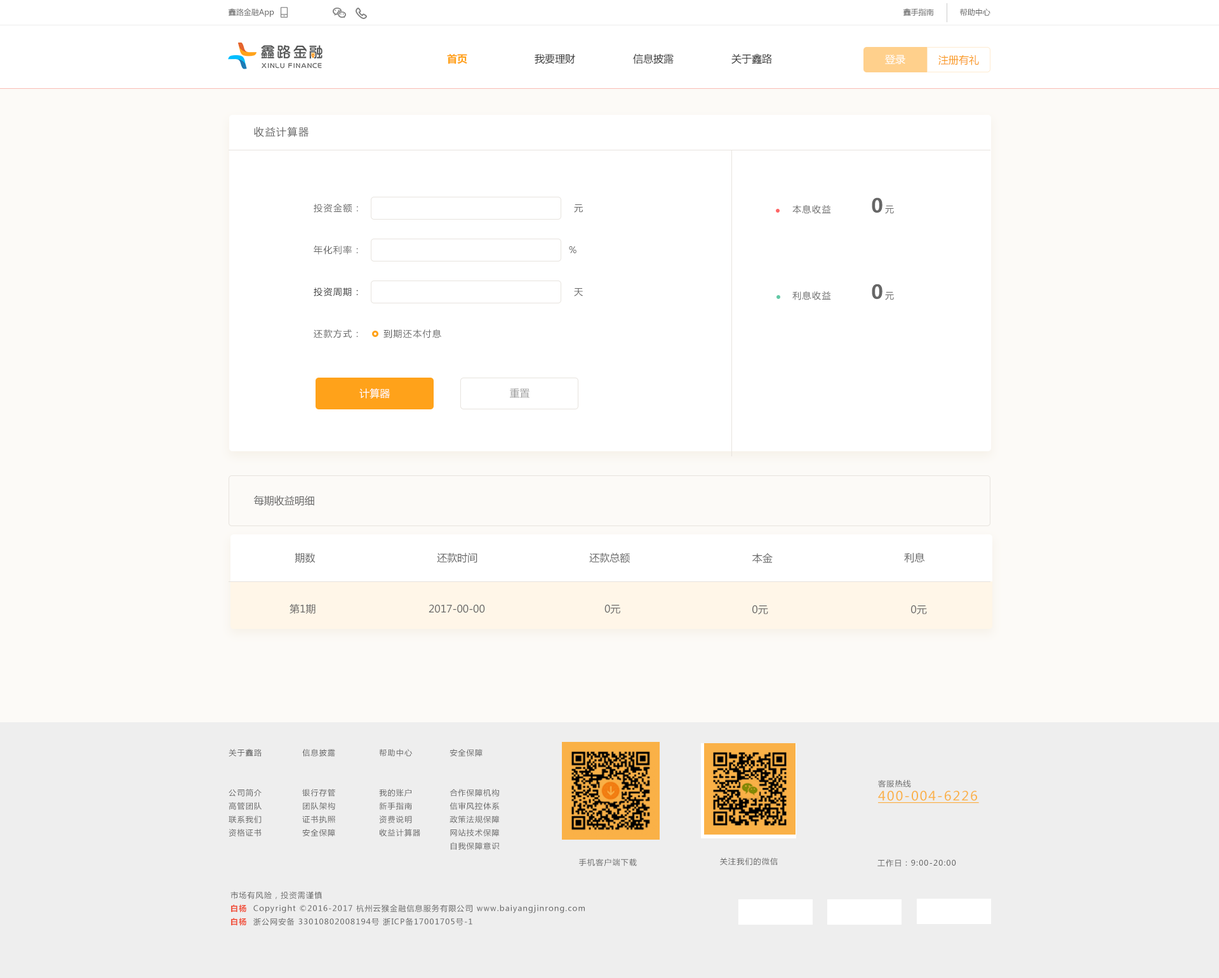
<style>
.page{position:relative;width:1219px;height:978px;background:#fcfaf7}
.page>*{position:absolute;margin:0}
.t1{font:7.6px "MicrosoftYaHei";color:#666666}
.t2{font:10.2px "MicrosoftYaHei-Bold";color:#ffa21a}
.t3{font:10.2px "MicrosoftYaHei";color:#333333}
.t4{font:10.2px "MicrosoftYaHei";color:#ffffff}
.t5{font:10.2px "MicrosoftYaHei";color:#f99a1d}
.t6{font:10.2px "MicrosoftYaHei";letter-spacing:0.1em;color:#666666}
.t7{font:19px "MicrosoftYaHei-Bold";letter-spacing:0.1em;color:#666666}
.t8{font:8.9px "MicrosoftYaHei";letter-spacing:0.1em;color:#666666}
.t9{font:8.9px "MicrosoftYaHei";letter-spacing:0.1em;color:#333333}
.t10{font:10.2px "MicrosoftYaHei";color:#999999}
.t11{font:10.2px "MicrosoftYaHei";color:#666666}
.t12{font:10px "MicrosoftYaHei";color:#666666}
.t13{font:7.6px "MicrosoftYaHei";letter-spacing:0.1em;color:#666666}
.t14{font:12.7px "MicrosoftYaHei";letter-spacing:0.1em;color:#fab147;text-decoration:underline}
.t15{font:7.6px "MicrosoftYaHei-Bold";letter-spacing:0.1em;color:#f05945}
</style>
<div class="page">
<p class="t1" style="left:228px;top:8px;width:46px;height:9px">鑫路金融App</p>
<p class="t1" style="left:903px;top:8px;width:31px;height:8px">鑫手指南</p>
<p class="t1" style="left:960px;top:8px;width:30px;height:8px">帮助中心</p>
<p class="t2" style="left:447px;top:54px;width:20px;height:10px">首页</p>
<p class="t3" style="left:535px;top:54px;width:40px;height:10px">我要理财</p>
<p class="t3" style="left:633px;top:53px;width:41px;height:11px">信息披露</p>
<p class="t3" style="left:731px;top:53px;width:41px;height:11px">关于鑫路</p>
<p class="t4" style="left:885px;top:55px;width:20px;height:9px">登录</p>
<p class="t5" style="left:938px;top:55px;width:41px;height:10px">注册有礼</p>
<p class="t6" style="left:254px;top:127px;width:55px;height:10px">收益计算器</p>
<p class="t7" style="left:872px;top:197px;width:22px;height:17px">0<span class="t8">元</span></p>
<p class="t8" style="left:314px;top:204px;width:44px;height:9px">投资金额：</p>
<p class="t8" style="left:574px;top:204px;width:9px;height:9px">元</p>
<p class="t8" style="left:792px;top:205px;width:39px;height:9px">本息收益</p>
<p class="t8" style="left:314px;top:245px;width:44px;height:10px">年化利率：</p>
<p class="t8" style="left:569px;top:246px;width:7px;height:7px">%</p>
<p class="t9" style="left:314px;top:288px;width:44px;height:8px">投资周期：</p>
<p class="t8" style="left:574px;top:288px;width:9px;height:8px">天</p>
<p class="t8" style="left:792px;top:291px;width:39px;height:9px">利息收益</p>
<p class="t7" style="left:872px;top:284px;width:22px;height:16px">0<span class="t8">元</span></p>
<p class="t8" style="left:314px;top:329px;width:44px;height:9px">还款方式：</p>
<p class="t8" style="left:383px;top:329px;width:58px;height:9px">到期还本付息</p>
<p class="t4" style="left:359px;top:389px;width:31px;height:10px">计算器</p>
<p class="t10" style="left:510px;top:389px;width:19px;height:9px">重置</p>
<p class="t11" style="left:254px;top:496px;width:60px;height:10px">每期收益明细</p>
<p class="t11" style="left:295px;top:553px;width:21px;height:10px">期数</p>
<p class="t11" style="left:437px;top:553px;width:40px;height:10px">还款时间</p>
<p class="t11" style="left:589px;top:553px;width:41px;height:10px">还款总额</p>
<p class="t11" style="left:752px;top:554px;width:21px;height:10px">本金</p>
<p class="t11" style="left:904px;top:553px;width:21px;height:10px">利息</p>
<p class="t12" style="left:289px;top:604px;width:27px;height:11px">第1期</p>
<p class="t12" style="left:429px;top:604px;width:56px;height:9px">2017-00-00</p>
<p class="t12" style="left:604px;top:604px;width:16px;height:10px">0元</p>
<p class="t12" style="left:752px;top:605px;width:16px;height:10px">0元</p>
<p class="t12" style="left:911px;top:605px;width:16px;height:10px">0元</p>
<p class="t13" style="left:229px;top:749px;width:33px;height:88px">关于鑫路<br><br><br>公司简介<br>高管团队<br>联系我们<br>资格证书</p>
<p class="t13" style="left:302px;top:749px;width:33px;height:88px">信息披露<br><br><br>银行存管<br>团队架构<br>证书执照<br>安全保障</p>
<p class="t13" style="left:379px;top:749px;width:41px;height:88px">帮助中心<br><br><br>我的账户<br>新手指南<br>资费说明<br>收益计算器</p>
<p class="t13" style="left:449px;top:749px;width:51px;height:101px">安全保障<br><br><br>合作保障机构<br>信审风控体系<br>政策法规保障<br>网站技术保障<br>自我保障意识</p>
<p class="t13" style="left:878px;top:780px;width:33px;height:8px">客服热线</p>
<p class="t14" style="left:878px;top:791px;width:101px;height:13px">400-004-6226</p>
<p class="t13" style="left:720px;top:858px;width:58px;height:8px">关注我们的微信</p>
<p class="t13" style="left:579px;top:858px;width:58px;height:9px">手机客户端下载</p>
<p class="t13" style="left:877px;top:860px;width:79px;height:7px">工作日：9:00-20:00</p>
<p class="t13" style="left:230px;top:891px;width:92px;height:9px">市场有风险，投资需谨慎</p>
<p class="t13" style="left:231px;top:905px;width:354px;height:21px"><span class="t15">白杨 </span> Copyright ©2016-2017 杭州云猴金融信息服务有限公司 www.baiyangjinrong.com<br><span class="t15">白杨 </span> 浙公网安备 33010802008194号 浙ICP备17001705号-1</p>
</div>
